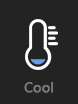
<style>
.page{position:relative;width:78px;height:104px;background:#232323}
.page>*{position:absolute;margin:0}
.t1{font:14px "SegoeUI";color:#7c7c7c;font-weight:bold}
</style>
<div class="page">
<p class="t1" style="left:24px;top:82px;width:29px;height:11px">Cool</p>
</div>
